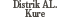
<style>
.page{position:relative;width:70px;height:19px;background:#ffffff}
.page>*{position:absolute;margin:0}
.t1{font:10px/9px "RyuminPro-ExBold";letter-spacing:-0.04em;color:#4c4843;scale:0.9 1}
</style>
<div class="page">
<p class="t1" style="left:13px;top:0px;width:44px;height:17px;text-align:center">Distrik AL.<br>Kure</p>
</div>
